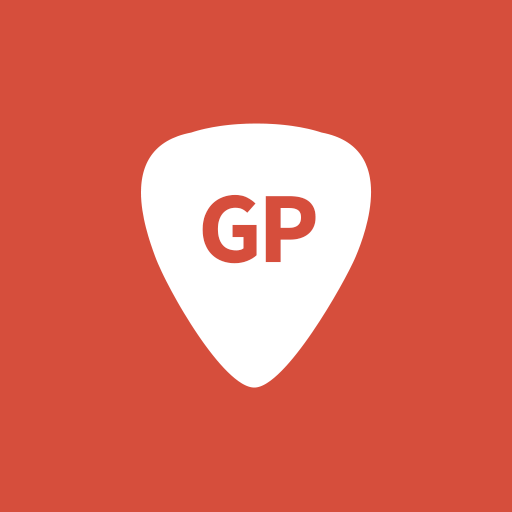
<style>
.page{position:relative;width:512px;height:512px;background:#d64e3c}
.page>*{position:absolute;margin:0}
.t1{font:100.7px "SourceSansPro-Bold";letter-spacing:-0.04em;color:#d64e3c}
</style>
<div class="page">
<p class="t1" style="left:202px;top:194px;width:114px;height:70px">GP</p>
</div>
